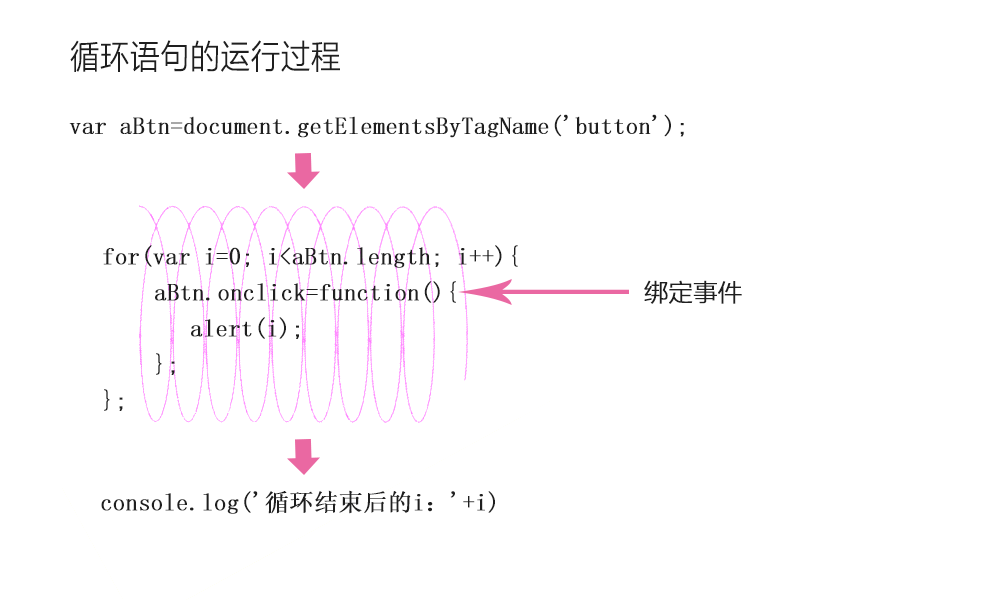
<style>
.page{position:relative;width:1000px;height:600px;background:#ffffff}
.page>*{position:absolute;margin:0}
.t1{font:33px "MicrosoftYaHeiLight";color:#1f1f1f;font-weight:bold;scale:0.89 1}
.t2{font:24px "SimSun";color:#1f1f1f;font-weight:bold}
.t3{font:24px/36px "SimSun";color:#1f1f1f;font-weight:bold}
.t4{font:24px "MicrosoftYaHeiLight";color:#1f1f1f;font-weight:bold}
</style>
<div class="page">
<p class="t1" style="left:70px;top:40px;width:270px;height:32px">循环语句的运行过程</p>
<p class="t2" style="left:69px;top:114px;width:615px;height:24px">var aBtn=document.getElementsByTagName('button');</p>
<p class="t3" style="left:103px;top:245px;width:415px;height:166px;text-align:justify">for(var i=0; i&lt;aBtn.length; i++){<br>  aBtn.onclick=function(){<br>   alert(i);<br>  };<br>};</p>
<p class="t4" style="left:644px;top:280px;width:98px;height:24px">绑定事件</p>
<p class="t2" style="left:101px;top:490px;width:394px;height:24px">console.log('循环结束后的i：'+i)</p>
</div>
